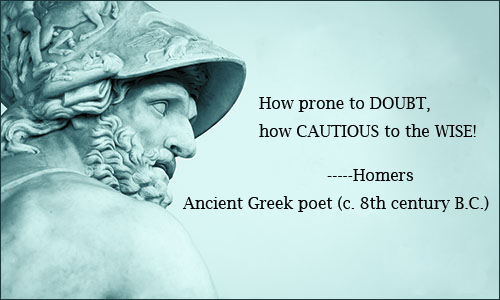
<style>
.page{position:relative;width:500px;height:300px}
.page>*{position:absolute;margin:0}
.t1{font:16px "LucidaBright";color:#000000}
</style>
<div class="page">
<p class="t1" style="left:259px;top:97px;width:217px;height:40px">How prone to DOUBT,<br>how CAUTIOUS to the WISE!</p>
<p class="t1" style="left:182px;top:169px;width:307px;height:43px">-----Homers<br>Ancient Greek poet (c. 8th century B.C.)<br>Read more at http://www.notable-quotes.com/h/homer_quotes.html#hoit7fXrAI8qjLrA.99</p>
</div>
